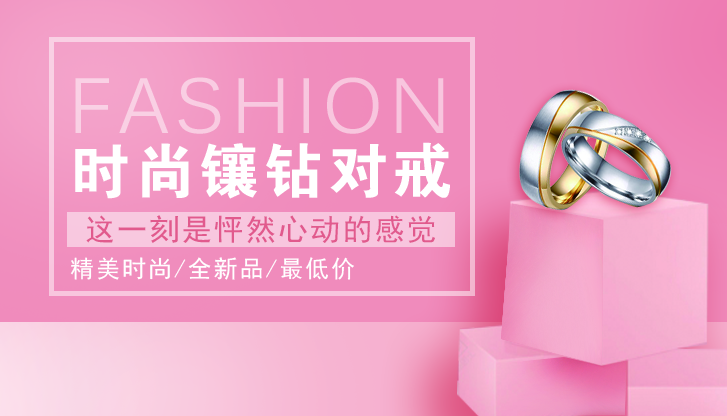
<style>
.page{position:relative;width:727px;height:416px}
.page>*{position:absolute;margin:0}
.t1{font:77px "Kalinga";letter-spacing:0.075em;color:#f8c9e0}
.t2{font:60px "FZDHTJW--GB1-0";letter-spacing:0.075em;color:#ffffff}
.t3{font:30px "SimHei";letter-spacing:0.075em;color:#e15a8d}
.t4{font:24px "SimHei";letter-spacing:0.075em;color:#ffffff}
</style>
<div class="page">
<p class="t1" style="left:75px;top:77px;width:369px;height:57px">FASHION</p>
<p class="t2" style="left:75px;top:142px;width:375px;height:57px">时尚镶钻对戒</p>
<p class="t3" style="left:86px;top:215px;width:349px;height:29px">这一刻是怦然心动的感觉</p>
<p class="t4" style="left:70px;top:257px;width:284px;height:23px">精美时尚/全新品/最低价</p>
</div>
